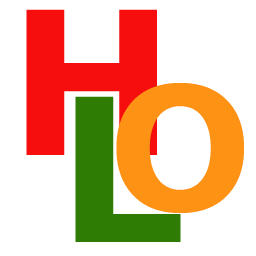
<style>
.page{position:relative;width:256px;height:256px;background:#ffffff}
.page>*{position:absolute;margin:0}
.t1{font:200px "Verdana-Bold";color:#f60e0e}
.t2{font:170px "Verdana-Bold";color:#fd9215}
.t3{font:200px "Verdana-Bold";color:#2f7c05}
</style>
<div class="page">
<p class="t1" style="left:26px;top:9px;width:131px;height:146px">H</p>
<p class="t2" style="left:116px;top:83px;width:128px;height:130px">O</p>
<p class="t3" style="left:75px;top:96px;width:106px;height:146px">L</p>
</div>
